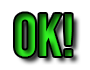
<style>
.page{position:relative;width:90px;height:70px;background:#ffffff}
.page>*{position:absolute;margin:0}
.t1{font:60px "BebasNeue-Regular"}
</style>
<div class="page">
<p class="t1" style="left:15px;top:13px;width:57px;height:44px">OK!</p>
</div>
